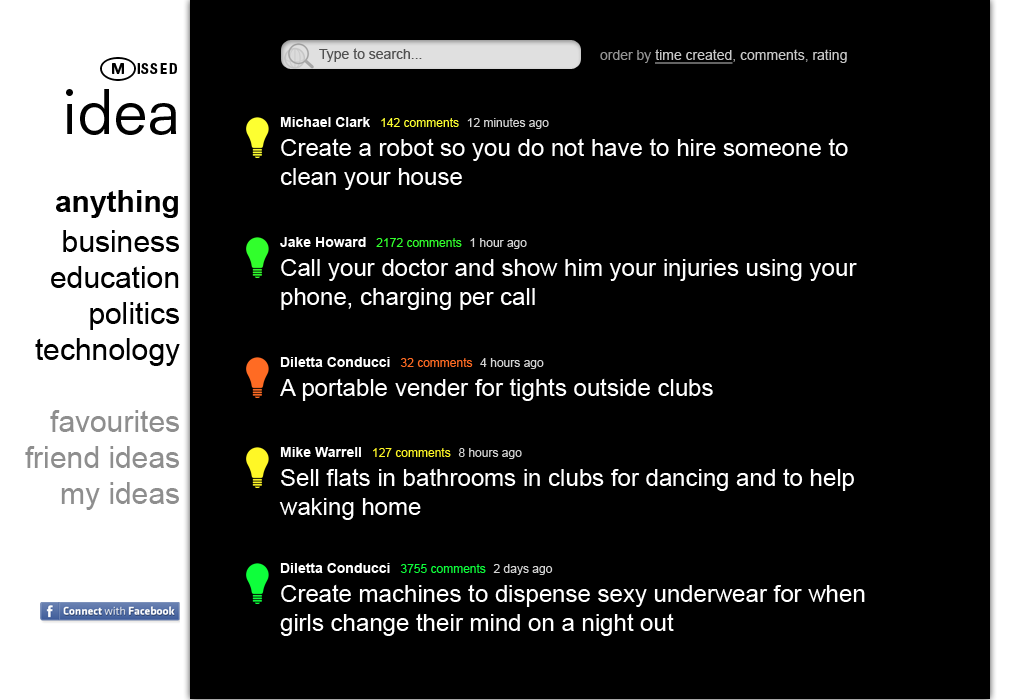
<style>
.page{position:relative;width:1020px;height:700px;background:#000000}
.page>*{position:absolute;margin:0}
.t1{font:14px "ArialMT";color:#515151}
.t2{font:14px "ArialMT";color:#ffffff;text-decoration:underline}
.t3{font:14px "ArialMT";color:#bebebe}
.t4{font:14px "ArialMT";color:#ffffff}
.t5{font:36px "NationalCodePiStd-Universal";color:#000000}
.t6{font:36px "NationalCodePiStd-Universal";letter-spacing:0.025em;color:#000000}
.t7{font:60px/60px "NeuzeitSLTStd-Book";color:#000000}
.t8{font:24px "ArialMT";color:#ffffff}
.t9{font:14px "Arial-BoldMT";color:#ffffff}
.t10{font:12px "ArialMT";color:#fdff31}
.t11{font:12px "ArialMT";color:#d5d5d5}
.t12{font:30px "ArialMT";color:#000000}
.t13{font:30px "Arial-BoldMT";color:#000000}
.t14{font:30px "ArialMT";color:#8e8e8e}
.t15{font:12px "ArialMT";color:#31ff2c}
.t16{font:12px "ArialMT";color:#ff6b23}
.t17{font:12px "ArialMT";color:#fff726}
.t18{font:12px "ArialMT";color:#0eff3b}
</style>
<div class="page">
<p class="t1" style="left:319px;top:48px;width:103px;height:14px">Type to search...</p>
<p class="t2" style="left:600px;top:49px;width:247px;height:15px;opacity:0.78"><span class="t3">order by </span>time created<span class="t3">, </span><span class="t4">comments</span><span class="t3">, </span><span class="t4">rating</span></p>
<p class="t5" style="left:66px;top:57px;width:111px;height:78px;text-align:right"><span class="t6">M</span>issed<br><span class="t7">idea</span></p>
<p class="t8" style="left:280px;top:117px;width:568px;height:73px"><span class="t9">Michael Clark   </span><span class="t10">142 comments  </span><span class="t11">12 minutes ago<br></span>Create a robot so you do not have to hire someone to clean your house</p>
<p class="t12" style="left:25px;top:190px;width:155px;height:320px;text-align:right"><span class="t13">anything</span><br>business<br>education<br>politics<br>technology<br><br><span class="t14">favourites<br>friend ideas<br>my ideas</span></p>
<p class="t8" style="left:280px;top:237px;width:577px;height:73px"><span class="t9">Jake Howard   </span><span class="t15">2172 comments  </span><span class="t11">1 hour ago<br></span>Call your doctor and show him your injuries using your phone, charging per call</p>
<p class="t8" style="left:280px;top:357px;width:433px;height:44px"><span class="t9">Diletta Conducci   </span><span class="t16">32 comments  </span><span class="t11">4 hours ago<br></span>A portable vender for tights outside clubs</p>
<p class="t8" style="left:279px;top:447px;width:575px;height:73px"><span class="t9">Mike Warrell   </span><span class="t17">127 comments  </span><span class="t11">8 hours ago<br></span>Sell flats in bathrooms in clubs for dancing and to help waking home</p>
<p class="t8" style="left:280px;top:563px;width:585px;height:73px"><span class="t9">Diletta Conducci   </span><span class="t18">3755 comments  </span><span class="t11">2 days ago<br></span>Create machines to dispense sexy underwear for when girls change their mind on a night out</p>
</div>
